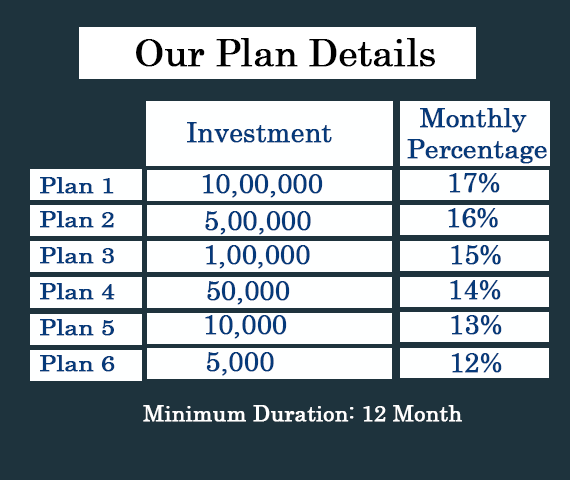
<style>
.page{position:relative;width:570px;height:480px;background:#1e333d}
.page>*{position:absolute;margin:0}
.t1{font:37.5px "Century";letter-spacing:-0.015em;color:#000000;font-weight:bold}
.t2{font:25.8px "Century";letter-spacing:-0.015em;color:#063a7a;font-weight:bold;scale:1.03 1}
.t3{font:27px "Century";letter-spacing:-0.015em;color:#063a7a;font-weight:bold}
.t4{font:21.6px "Century";letter-spacing:-0.015em;color:#063a7a;font-weight:bold;scale:1.14 1}
.t5{font:22.2px "Century";letter-spacing:-0.015em;color:#ffffff;font-weight:bold}
</style>
<div class="page">
<p class="t1" style="left:136px;top:38px;width:299px;height:29px">Our Plan Details</p>
<p class="t2" style="left:407px;top:108px;width:140px;height:56px;text-align:center">Monthly<br> Percentage</p>
<p class="t3" style="left:187px;top:122px;width:145px;height:21px">Investment</p>
<p class="t3" style="left:202px;top:174px;width:121px;height:24px">10,00,000</p>
<p class="t3" style="left:449px;top:173px;width:51px;height:20px">17%</p>
<p class="t4" style="left:40px;top:177px;width:74px;height:17px">Plan 1</p>
<p class="t3" style="left:448px;top:208px;width:50px;height:20px">16%</p>
<p class="t4" style="left:40px;top:211px;width:74px;height:17px">Plan 2</p>
<p class="t3" style="left:205px;top:211px;width:106px;height:24px">5,00,000</p>
<p class="t3" style="left:205px;top:245px;width:105px;height:24px">1,00,000</p>
<p class="t3" style="left:451px;top:245px;width:50px;height:20px">15%</p>
<p class="t4" style="left:40px;top:247px;width:74px;height:17px">Plan 3</p>
<p class="t3" style="left:207px;top:281px;width:83px;height:24px">50,000</p>
<p class="t3" style="left:450px;top:280px;width:51px;height:20px">14%</p>
<p class="t4" style="left:40px;top:283px;width:75px;height:17px">Plan 4</p>
<p class="t3" style="left:205px;top:315px;width:82px;height:24px">10,000</p>
<p class="t3" style="left:451px;top:315px;width:51px;height:20px">13%</p>
<p class="t4" style="left:40px;top:319px;width:74px;height:17px">Plan 5</p>
<p class="t3" style="left:206px;top:352px;width:68px;height:24px">5,000</p>
<p class="t3" style="left:451px;top:353px;width:51px;height:20px">12%</p>
<p class="t4" style="left:40px;top:355px;width:75px;height:17px">Plan 6</p>
<p class="t5" style="left:143px;top:405px;width:319px;height:17px">Minimum Duration: 12 Month</p>
</div>
